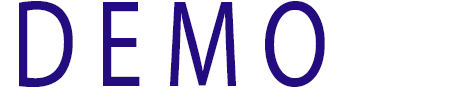
<style>
.page{position:relative;width:460px;height:97px;background:#ffffff}
.page>*{position:absolute;margin:0}
.t1{font:124.8px "MyriadPro-Regular";color:#240b7f;scale:0.77 1}
</style>
<div class="page">
<p class="t1" style="left:19px;top:1px;width:306px;height:86px">D E M O</p>
</div>
